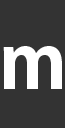
<style>
.page{position:relative;width:65px;height:128px;background:#333333}
.page>*{position:absolute;margin:0}
.t1{font:75px "AdobeGothicStd-Bold";color:#ffffff}
</style>
<div class="page">
<p class="t1" style="left:3px;top:46px;width:59px;height:43px">m</p>
</div>
